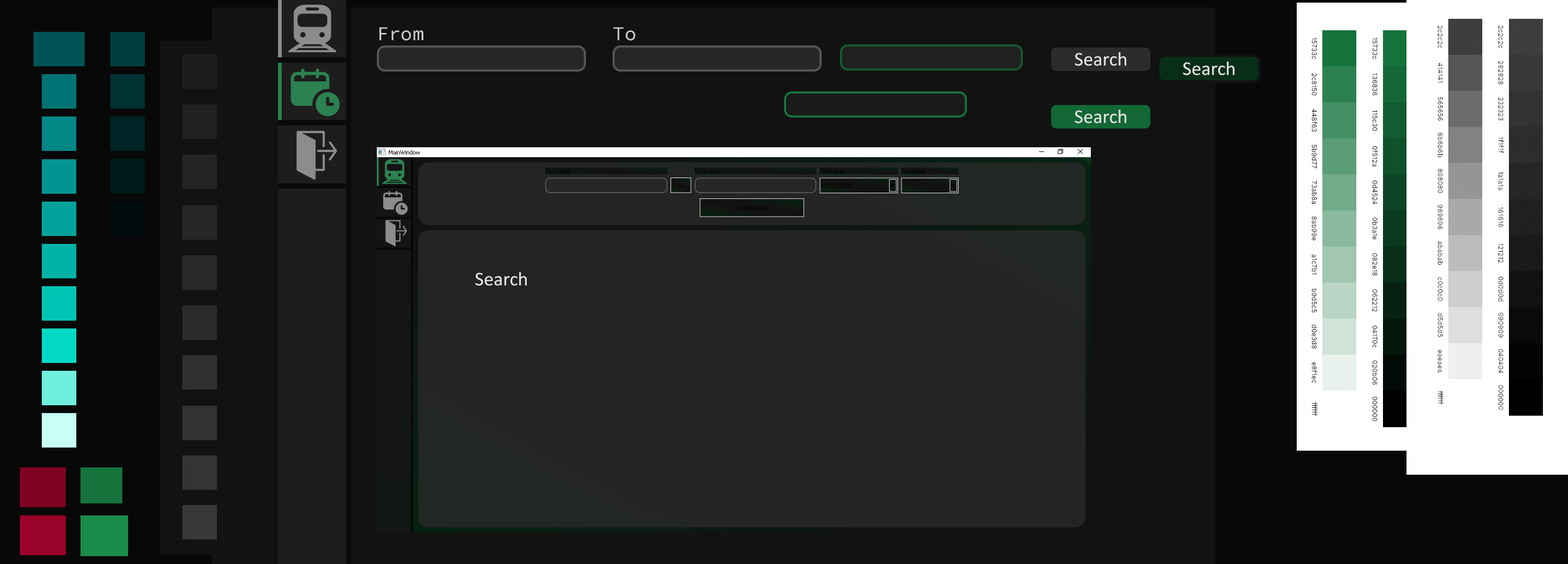
<style>
.page{position:relative;width:1568px;height:564px;background:#121212}
.page>*{position:absolute;margin:0}
.t1{font:19.6px "SourceCodeVariable-Roman";color:#cccccc}
.t2{font:19.6px "Calibri";color:#e6e6e6}
</style>
<div class="page">
<p class="t1" style="left:379px;top:27px;width:44px;height:14px">From</p>
<p class="t1" style="left:613px;top:27px;width:23px;height:14px">To</p>
<p class="t2" style="left:1075px;top:52px;width:51px;height:14px">Search</p>
<p class="t2" style="left:1183px;top:62px;width:52px;height:13px">Search</p>
<p class="t2" style="left:1075px;top:110px;width:51px;height:13px">Search</p>
<p class="t2" style="left:475px;top:272px;width:52px;height:14px">Search</p>
</div>
